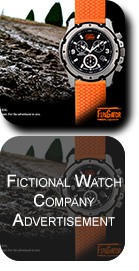
<style>
.page{position:relative;width:139px;height:271px}
.page>*{position:absolute;margin:0}
.t1{font:16.7px/19.4px "ArialMT";color:#ffffff;font-variant:small-caps}
</style>
<div class="page">
<p class="t1" style="left:7px;top:174px;width:114px;height:52px;text-align:center">Fictional Watch Company Advertisement</p>
</div>
